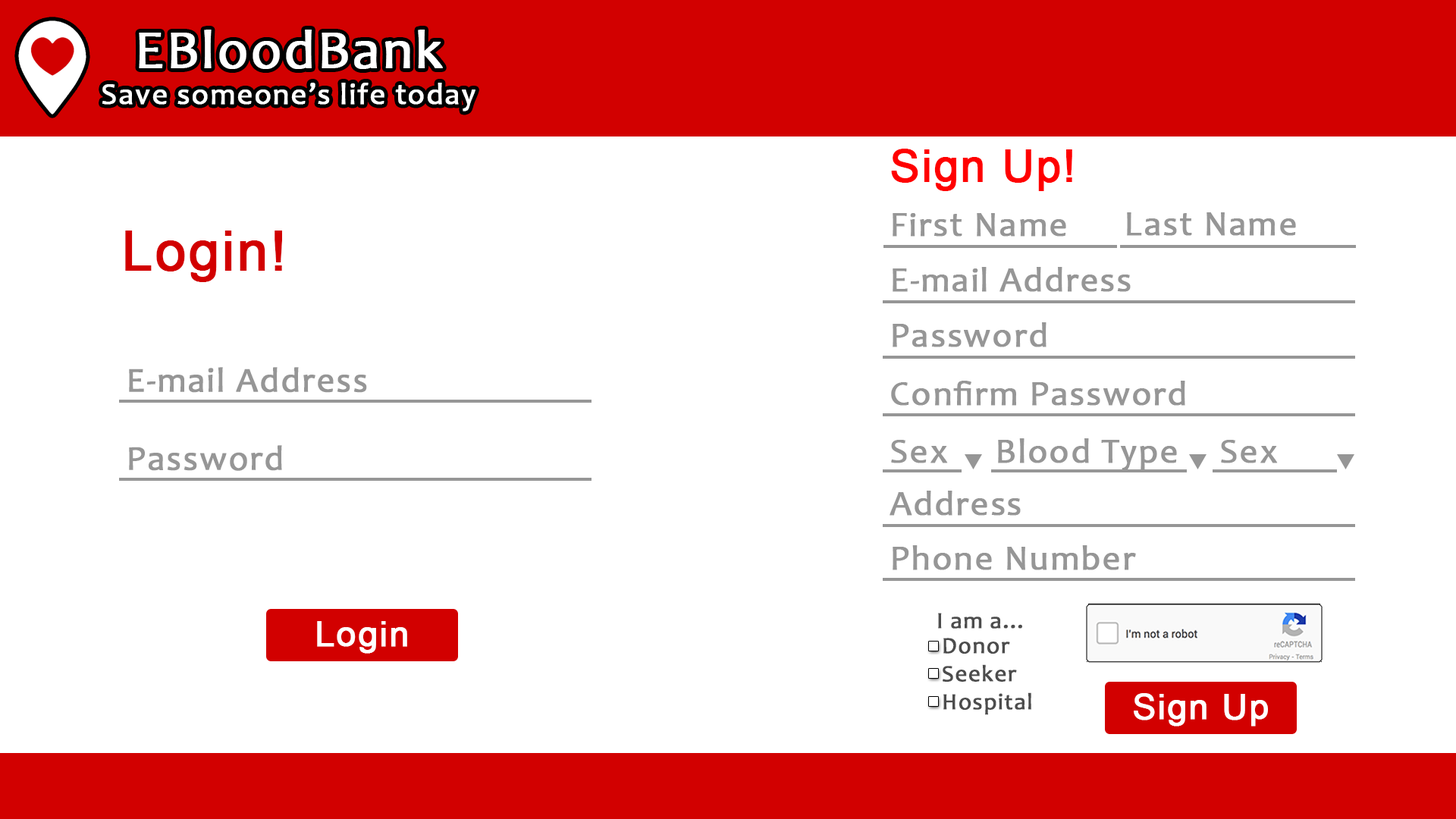
<style>
.page{position:relative;width:1456px;height:819px;background:#ffffff}
.page>*{position:absolute;margin:0}
.t1{font:30.3px "Candara";letter-spacing:0.03em;color:#ffffff;font-weight:bold}
.t2{font:54.6px "Candara";letter-spacing:0.03em;color:#ffffff;font-weight:bold}
.t3{font:43.7px "ArialMT";letter-spacing:0.03em;color:#ff0000;font-weight:bold}
.t4{font:34.9px "Candara";letter-spacing:0.03em;color:#969696;font-weight:bold}
.t5{font:54.6px "ArialMT";letter-spacing:0.03em;color:#d20000;font-weight:bold}
.t6{font:34.8px "Candara";letter-spacing:0.03em;color:#969696;font-weight:bold}
.t7{font:23.3px "Candara";letter-spacing:0.03em;color:#4c4c4c;font-weight:bold}
.t8{font:34.9px "ArialMT";letter-spacing:0.03em;color:#ffffff;font-weight:bold}
</style>
<div class="page">
<p class="t1" style="left:102px;top:30px;width:373px;height:81px;text-align:center"><span class="t2">EBloodBank<br></span>Save someone’s life today</p>
<p class="t3" style="left:891px;top:149px;width:181px;height:42px">Sign Up!</p>
<p class="t4" style="left:893px;top:213px;width:173px;height:24px">First Name</p>
<p class="t4" style="left:1127px;top:212px;width:169px;height:24px">Last Name</p>
<p class="t5" style="left:125px;top:231px;width:157px;height:51px">Login!</p>
<p class="t4" style="left:893px;top:267px;width:238px;height:25px">E-mail Address</p>
<p class="t4" style="left:893px;top:322px;width:153px;height:25px">Password</p>
<p class="t6" style="left:129px;top:367px;width:238px;height:26px">E-mail Address</p>
<p class="t4" style="left:891px;top:381px;width:294px;height:25px">Confirm Password</p>
<p class="t6" style="left:129px;top:445px;width:153px;height:26px">Password</p>
<p class="t4" style="left:891px;top:440px;width:57px;height:23px">Sex</p>
<p class="t4" style="left:998px;top:438px;width:179px;height:33px">Blood Type</p>
<p class="t4" style="left:1221px;top:440px;width:57px;height:23px">Sex</p>
<p class="t4" style="left:890px;top:491px;width:131px;height:25px">Address</p>
<p class="t4" style="left:893px;top:545px;width:243px;height:25px">Phone Number</p>
<p class="t7" style="left:938px;top:613px;width:84px;height:16px">I am a...</p>
<p class="t8" style="left:317px;top:621px;width:90px;height:33px">Login</p>
<p class="t7" style="left:943px;top:638px;width:88px;height:77px">Donor<br>Seeker<br>Hospital</p>
<p class="t8" style="left:1134px;top:693px;width:134px;height:33px">Sign Up</p>
</div>
